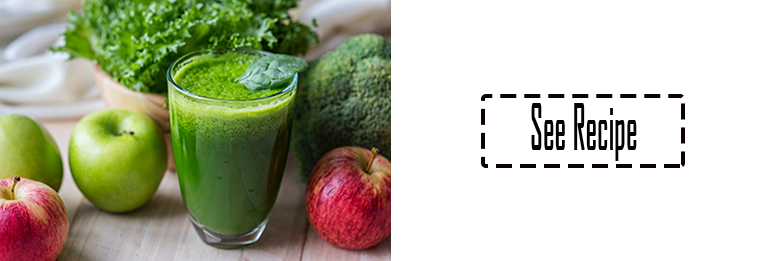
<style>
.page{position:relative;width:782px;height:261px;background:#ffffff}
.page>*{position:absolute;margin:0}
.t1{font:60px "AgencyFB-Reg";color:#020202;font-weight:bold;scale:0.48 1}
</style>
<div class="page">
<p class="t1" style="left:531px;top:103px;width:106px;height:58px">See Recipe</p>
</div>
